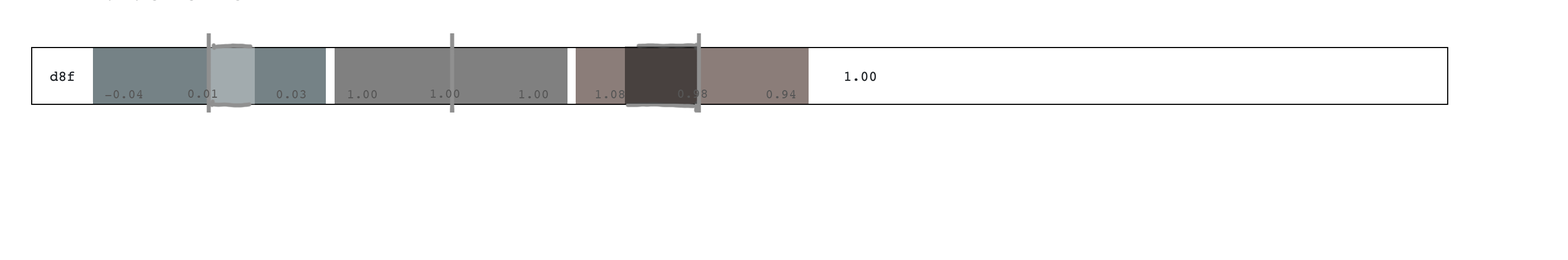
<style>
.page{position:relative;width:1568px;height:260px;background:#ffffff}
.page>*{position:absolute;margin:0}
.t1{font:13.1px "Courier";color:#565656}
</style>
<div class="page">
<p class="t1" style="left:188px;top:90px;width:29px;height:8px">0.01</p>
<p class="t1" style="left:431px;top:90px;width:29px;height:8px">1.00</p>
<p class="t1" style="left:105px;top:90px;width:38px;height:8px">-0.04</p>
<p class="t1" style="left:277px;top:90px;width:29px;height:8px">0.03</p>
<p class="t1" style="left:348px;top:90px;width:29px;height:8px">1.00</p>
<p class="t1" style="left:519px;top:90px;width:29px;height:8px">1.00</p>
<p class="t1" style="left:596px;top:90px;width:29px;height:8px">1.08</p>
<p class="t1" style="left:767px;top:90px;width:28px;height:8px">0.94</p>
</div>
